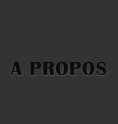
<style>
.page{position:relative;width:118px;height:124px;background:#333333}
.page>*{position:absolute;margin:0}
.t1{font:20px "BritannicBold";letter-spacing:0.04em;color:#0c0c0c}
</style>
<div class="page">
<p class="t1" style="left:10px;top:62px;width:97px;height:13px">A PROPOS</p>
</div>
